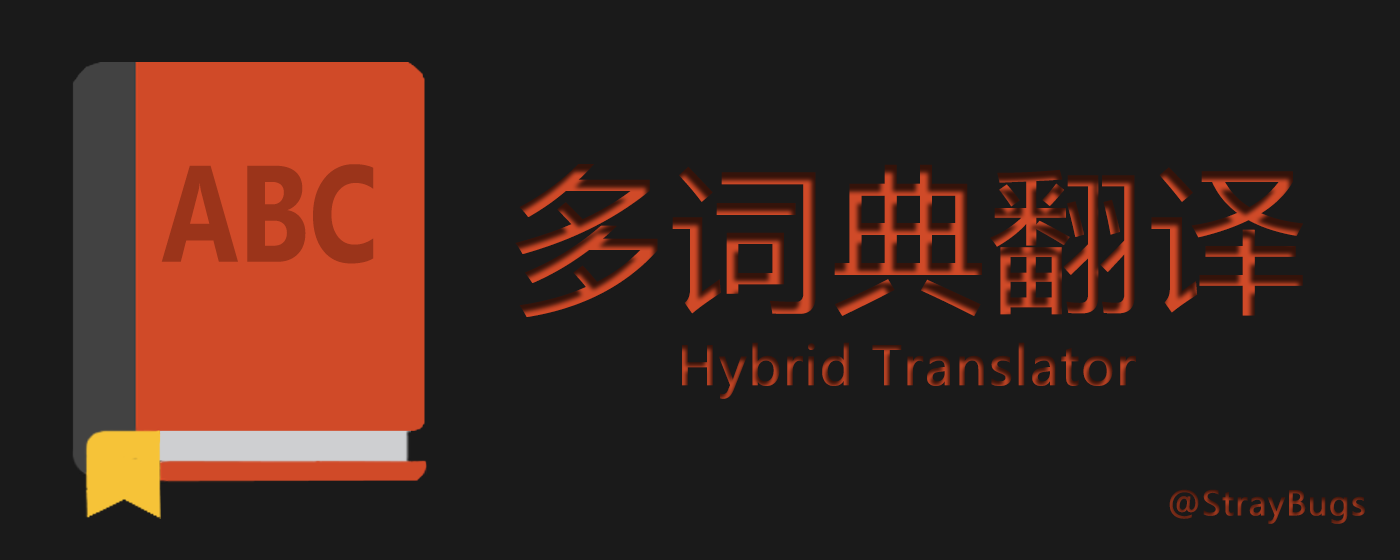
<style>
.page{position:relative;width:1400px;height:560px;background:#1a1a1a}
.page>*{position:absolute;margin:0}
.t1{font:136.9px "Leelawadee-Bold";color:#9b341a;scale:0.8 1}
.t2{font:157.3px "MicrosoftYaHei";font-weight:bold}
.t3{font:52.4px "MicrosoftYaHei";font-weight:bold}
.t4{font:32.9px "MicrosoftYaHei";font-weight:bold}
</style>
<div class="page">
<p class="t1" style="left:161px;top:164px;width:213px;height:100px">ABC</p>
<p class="t2" style="left:515px;top:164px;width:788px;height:153px">多词典翻译</p>
<p class="t3" style="left:682px;top:342px;width:454px;height:57px">Hybrid Translator</p>
<p class="t4" style="left:1169px;top:489px;width:196px;height:35px">@StrayBugs</p>
</div>
